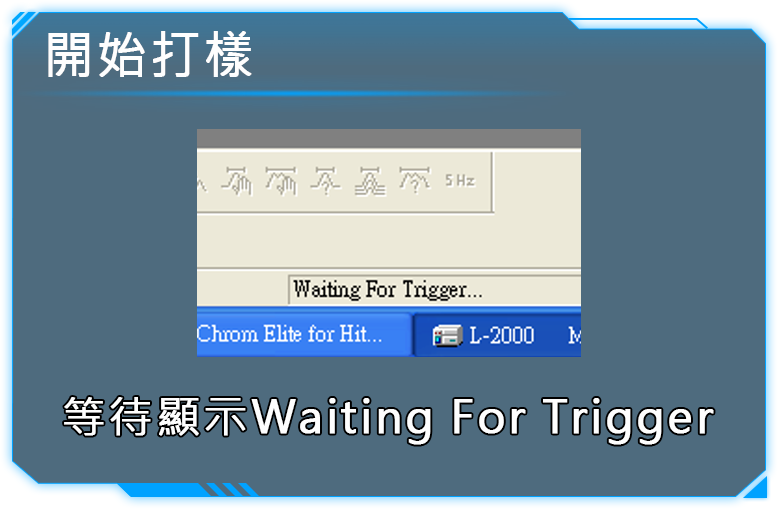
<style>
.page{position:relative;width:778px;height:509px;background:#4e6b7e}
.page>*{position:absolute;margin:0}
.t1{font:49.5px "MicrosoftJhengHeiRegular";letter-spacing:0.05em;color:#fefefe;font-weight:bold}
.t2{font:44px "MicrosoftJhengHeiRegular";letter-spacing:0.05em;color:#fefefe;font-weight:bold}
</style>
<div class="page">
<p class="t1" style="left:48px;top:31px;width:204px;height:46px">開始打樣</p>
<p class="t2" style="left:64px;top:397px;width:650px;height:48px">等待顯示Waiting For Trigger</p>
</div>
